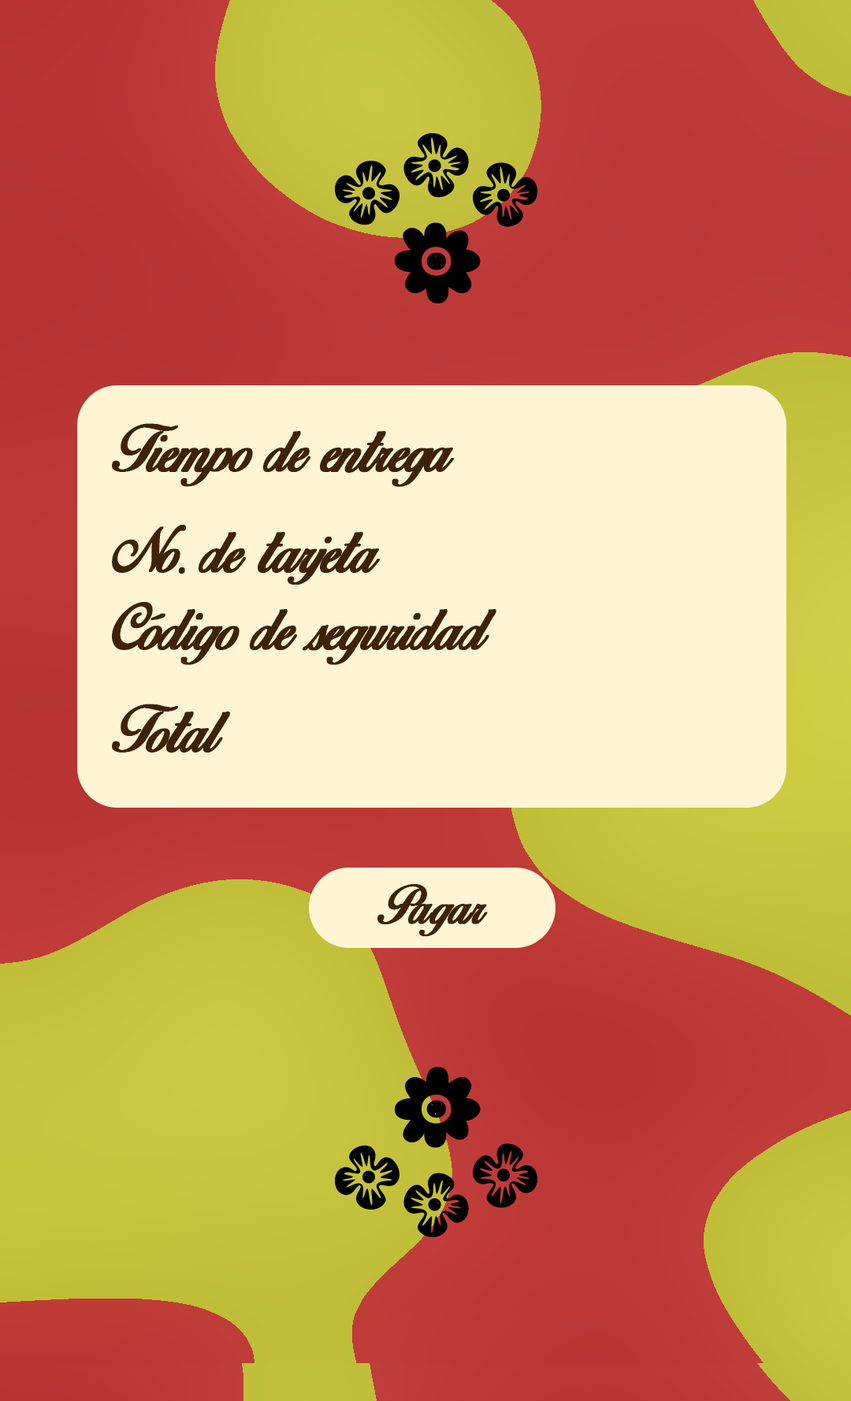
<style>
.page{position:relative;width:851px;height:1401px;background:#fff5d4}
.page>*{position:absolute;margin:0}
.t1{font:56.7px "BirdsofParadise";letter-spacing:-0.025em;color:#3e2202;font-weight:bold}
.t2{font:47.3px "BirdsofParadise";color:#3e2202;font-weight:bold}
</style>
<div class="page">
<p class="t1" style="left:112px;top:423px;width:342px;height:64px">Tiempo de entrega</p>
<p class="t1" style="left:112px;top:525px;width:268px;height:60px">No. de tarjeta</p>
<p class="t1" style="left:112px;top:602px;width:384px;height:63px">Código de seguridad</p>
<p class="t1" style="left:112px;top:704px;width:118px;height:49px">Total</p>
<p class="t2" style="left:377px;top:884px;width:111px;height:53px">Pagar</p>
</div>
